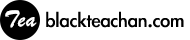
<style>
.page{position:relative;width:190px;height:40px;background:#ffffff}
.page>*{position:absolute;margin:0}
.t1{font:24.4px "STXingkai";color:#ffffff}
.t2{font:22.2px "LiGothicMed";color:#000000}
</style>
<div class="page">
<p class="t1" style="left:5px;top:10px;width:32px;height:18px">Tea</p>
<p class="t2" style="left:46px;top:11px;width:138px;height:17px">blackteachan.com</p>
</div>
